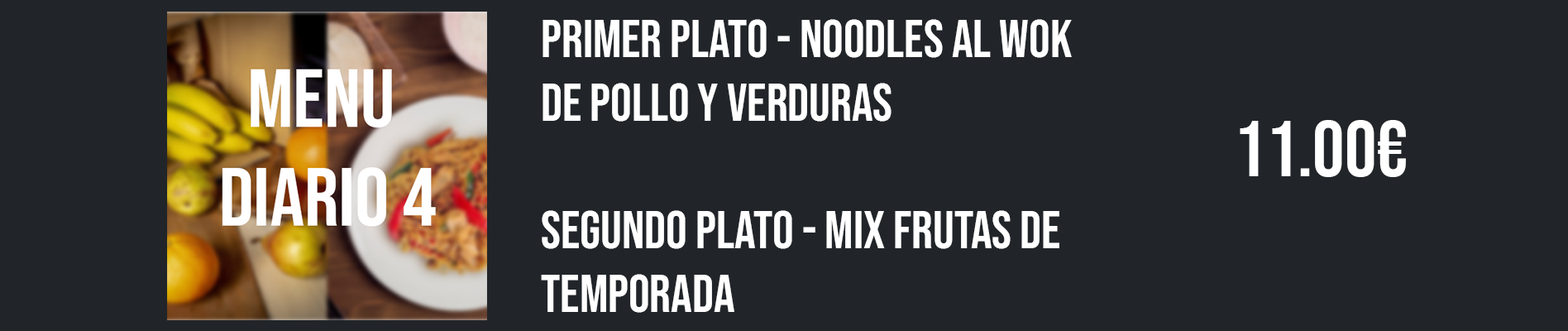
<style>
.page{position:relative;width:1568px;height:331px;background:#212529}
.page>*{position:absolute;margin:0}
.t1{font:52.9px "BebasNeue-Regular";color:#ffffff}
.t2{font:79.4px "BebasNeue-Regular";color:#ffffff}
</style>
<div class="page">
<p class="t1" style="left:541px;top:19px;width:531px;height:294px">Primer plato - Noodles al wok <br>de pollo y verduras<br><br>Segundo Plato - Mix frutas de <br>temporada</p>
<p class="t2" style="left:1240px;top:120px;width:166px;height:57px">11.00€</p>
</div>
